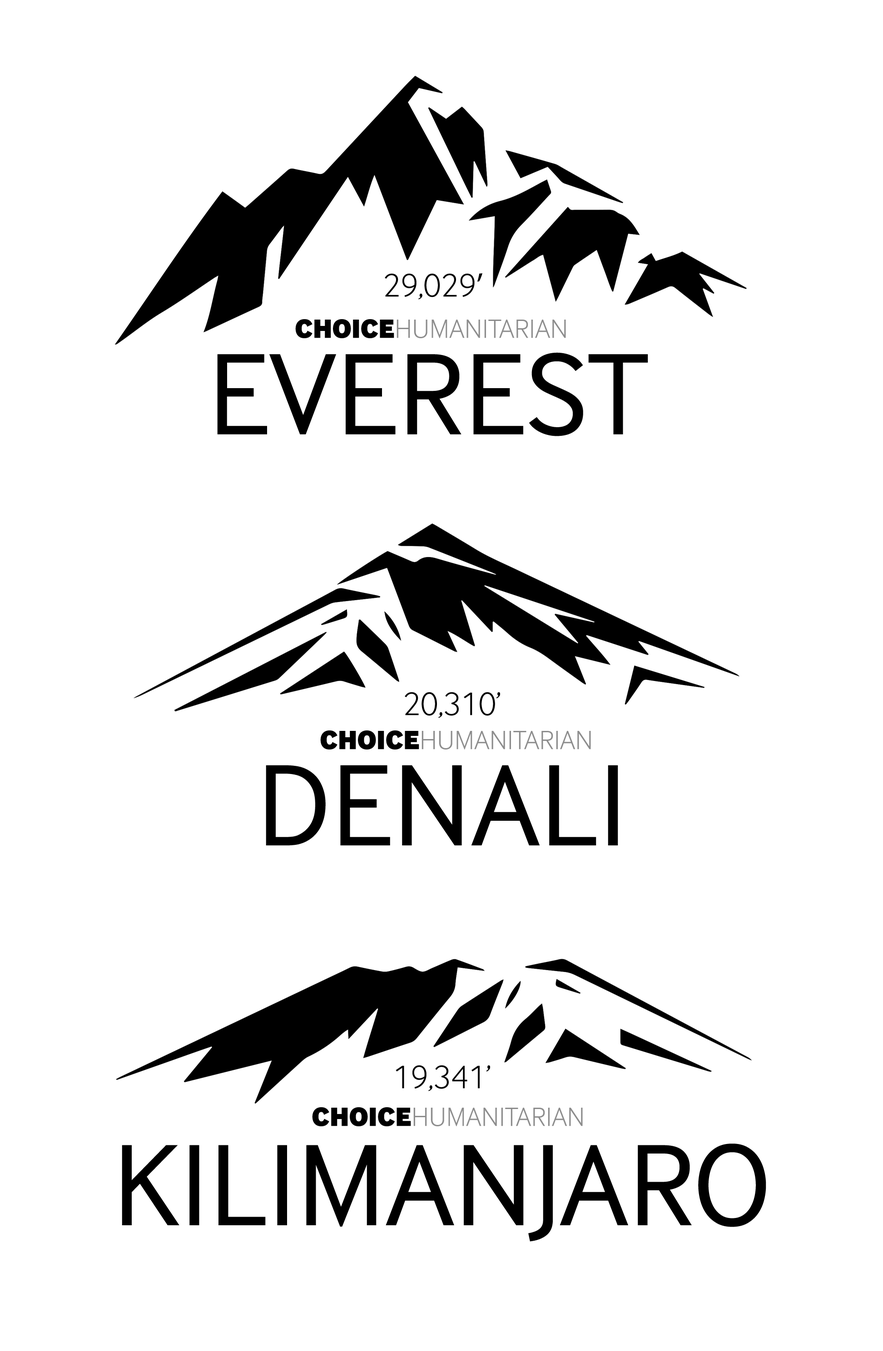
<style>
.page{position:relative;width:883px;height:1351px;background:#ffffff}
.page>*{position:absolute;margin:0}
.t1{font:34px "InterFace-Light";color:#000000}
.t2{font:34px "MyriadPro-Regular";color:#000000}
.t3{font:27.5px "InterFace-Light";color:#8d8d8d}
.t4{font:27.5px "InterFace-Black";color:#000000}
.t5{font:120px "InterFace-Regular";color:#000000}
.t6{font:120px "InterFace-Regular";color:#000000;text-transform:uppercase}
</style>
<div class="page">
<p class="t1" style="left:385px;top:273px;width:97px;height:27px">29,029<span class="t2">’</span></p>
<p class="t3" style="left:295px;top:319px;width:271px;height:19px"><span class="t4">CHOICE</span>HUMANITARIAN</p>
<p class="t5" style="left:217px;top:352px;width:431px;height:84px">EVEREST</p>
<p class="t1" style="left:405px;top:692px;width:95px;height:26px">20,310’</p>
<p class="t3" style="left:320px;top:730px;width:271px;height:20px"><span class="t4">CHOICE</span>HUMANITARIAN</p>
<p class="t6" style="left:266px;top:765px;width:352px;height:81px">DENALI</p>
<p class="t1" style="left:395px;top:1065px;width:95px;height:26px">19,341’</p>
<p class="t3" style="left:312px;top:1107px;width:270px;height:19px"><span class="t4">CHOICE</span>HUMANITARIAN</p>
<p class="t6" style="left:122px;top:1144px;width:644px;height:98px">Kilimanjaro</p>
</div>
